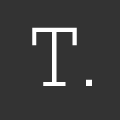
<style>
.page{position:relative;width:120px;height:120px;background:#333333}
.page>*{position:absolute;margin:0}
.t1{font:125px "DilleniaUPC";color:#ffffff}
</style>
<div class="page">
<p class="t1" style="left:32px;top:27px;width:60px;height:59px">T.</p>
</div>
